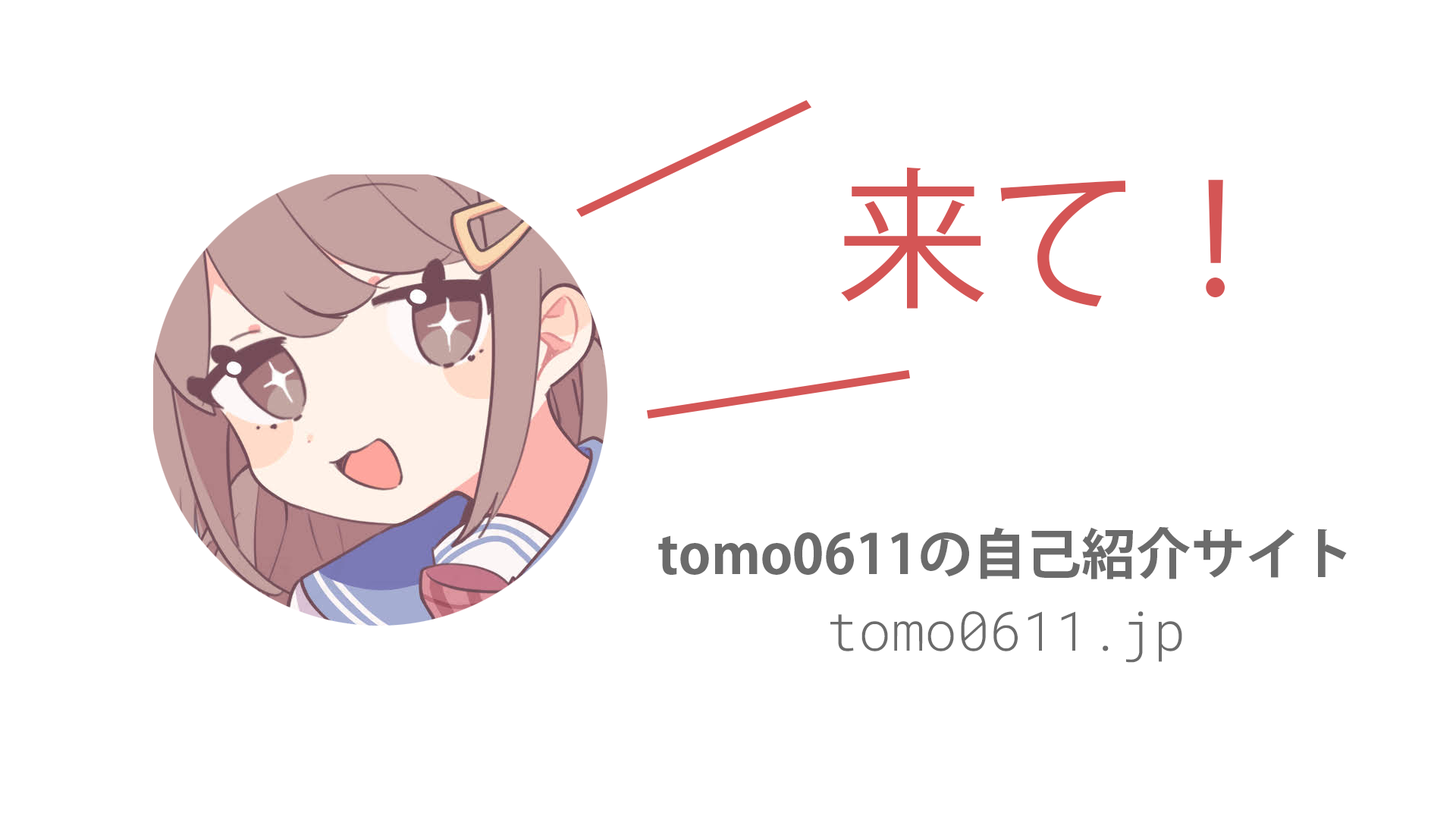
<style>
.page{position:relative;width:1456px;height:819px;background:#ffffff}
.page>*{position:absolute;margin:0}
.t1{font:151.7px "KozGoPr6N-Regular";color:#d45555}
.t2{font:54.6px "KozGoPr6N-Bold";color:#6b6b6b}
.t3{font:54.6px "RobotoMono-Light";color:#6b6b6b}
</style>
<div class="page">
<p class="t1" style="left:841px;top:167px;width:384px;height:142px">来て！</p>
<p class="t2" style="left:658px;top:527px;width:689px;height:52px">tomo0611の自己紹介サイト</p>
<p class="t3" style="left:830px;top:611px;width:352px;height:52px">tomo0611.jp</p>
</div>
